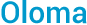
<style>
.page{position:relative;width:87px;height:25px;background:#ffffff}
.page>*{position:absolute;margin:0}
.t1{font:30px "Roboto-Medium";color:#0099cc}
</style>
<div class="page">
<p class="t1" style="left:1px;top:0px;width:86px;height:24px">Oloma</p>
</div>
